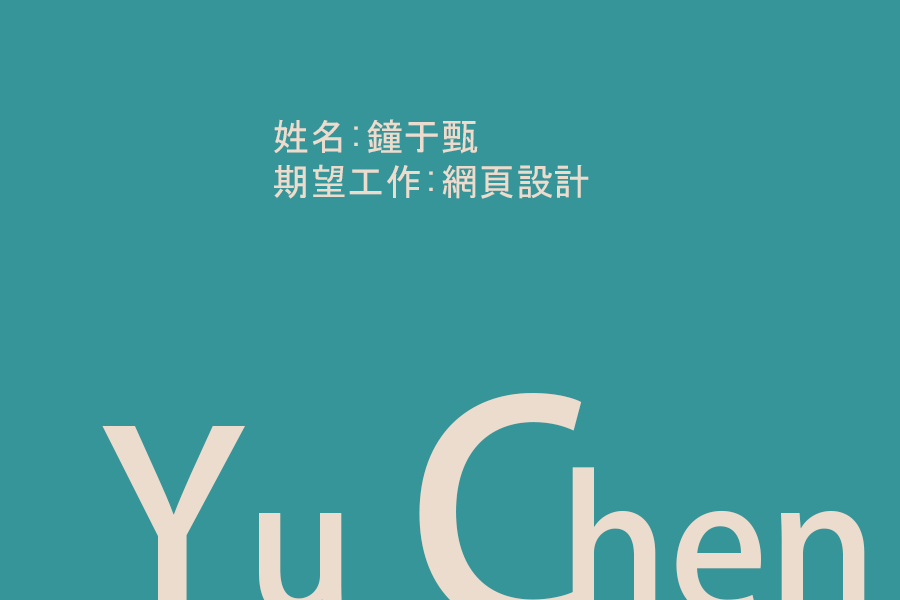
<style>
.page{position:relative;width:900px;height:600px;background:#359599}
.page>*{position:absolute;margin:0}
.t1{font:37.5px "MS-Gothic";color:#ebdcce}
</style>
<div class="page">
<p class="t1" style="left:274px;top:119px;width:315px;height:80px">姓名:鐘于甄<br>期望工作:網頁設計</p>
</div>
